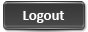
<style>
.page{position:relative;width:88px;height:32px}
.page>*{position:absolute;margin:0}
.t1{font:14.7px "Calibri-Bold";color:#ffffff}
</style>
<div class="page">
<p class="t1" style="left:23px;top:11px;width:42px;height:12px">Logout</p>
</div>
